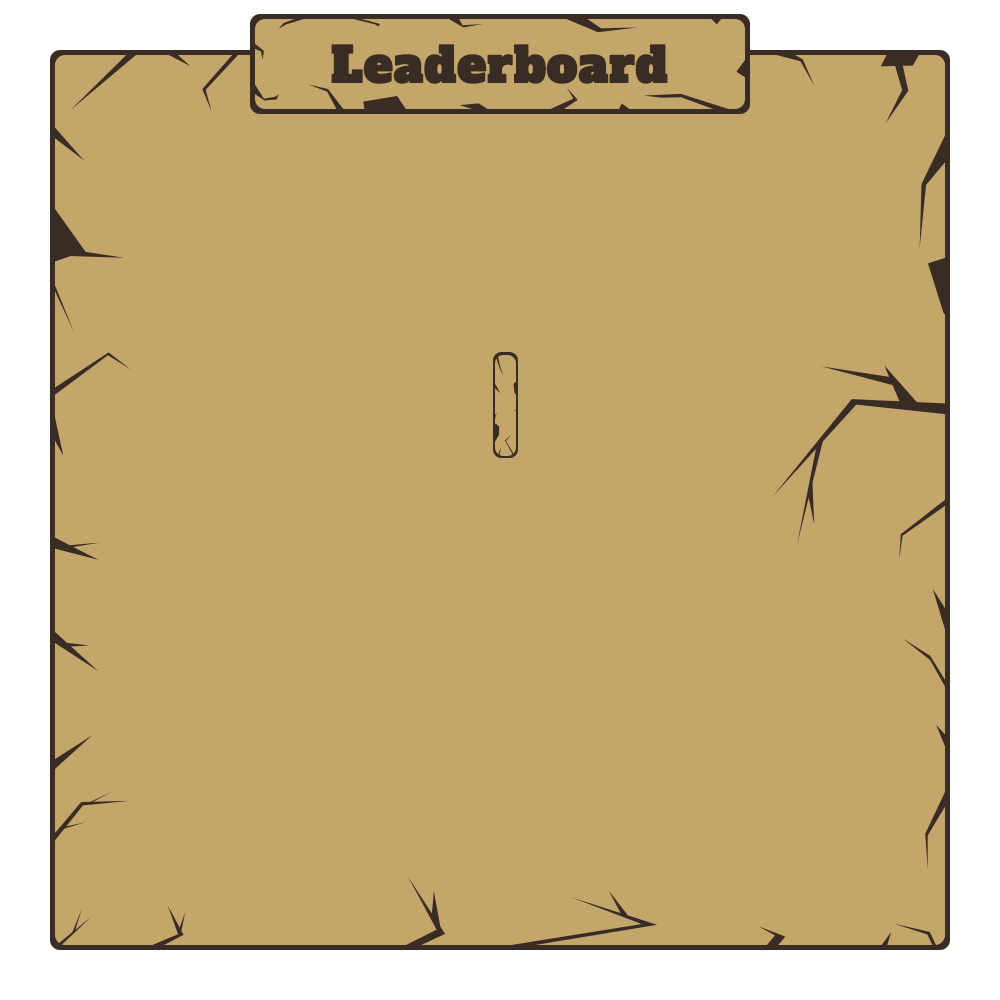
<style>
.page{position:relative;width:1000px;height:1000px;background:#c5a66a}
.page>*{position:absolute;margin:0}
.t1{font:48px "AlfaSlabOne-Regular";color:#392c24;font-weight:bold}
</style>
<div class="page">
<p class="t1" style="left:331px;top:44px;width:337px;height:40px">Leaderboard</p>
</div>
